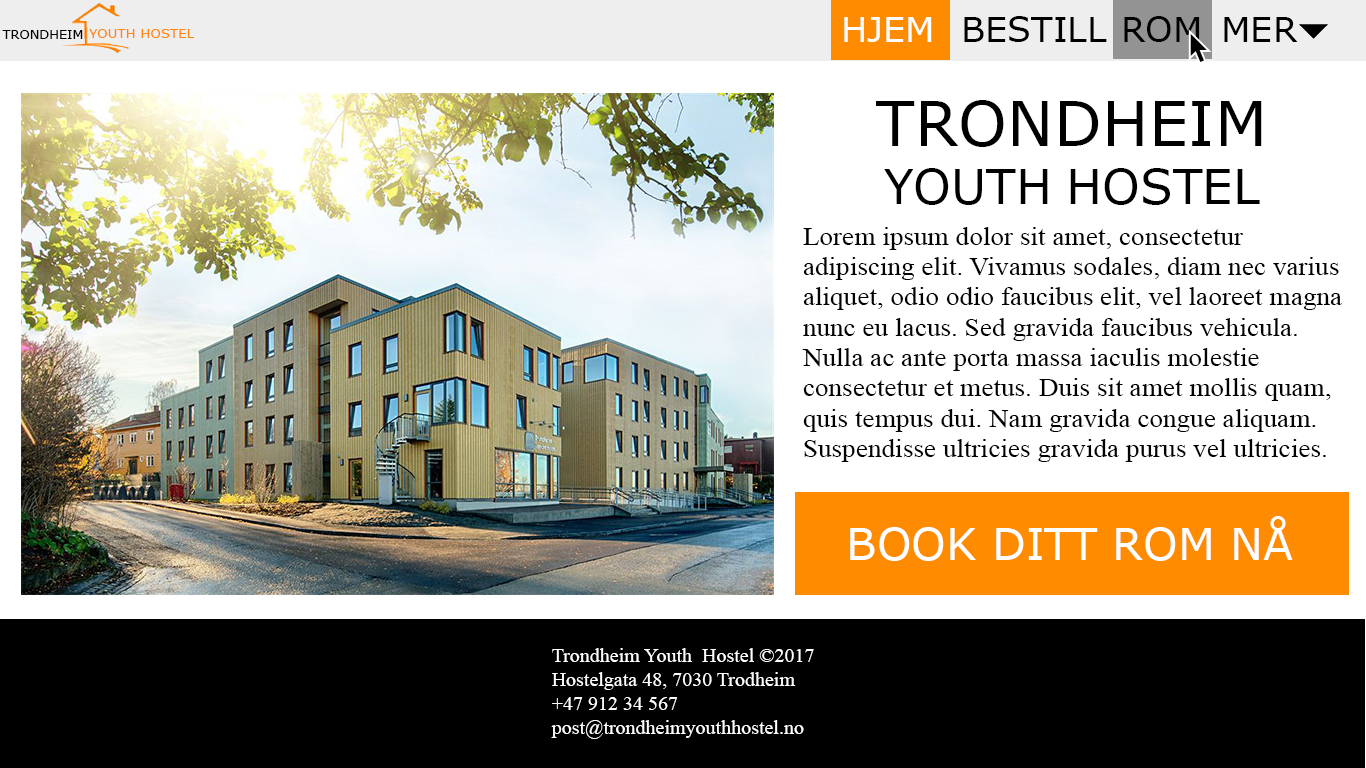
<style>
.page{position:relative;width:1366px;height:768px;background:#ffffff}
.page>*{position:absolute;margin:0}
.t1{font:35px "Verdana";color:#ffffff}
.t2{font:35px "Verdana";color:#000000}
.t3{font:12.9px "Verdana";color:#000000}
.t4{font:13.3px "Verdana";color:#fe8714}
.t5{font:48.2px "Verdana";color:#000000}
.t6{font:62.4px "Verdana";color:#000000}
.t7{font:25.3px "TimesNewRomanPSMT";color:#000000;scale:1.08 1}
.t8{font:44px "Verdana";color:#ffffff}
.t9{font:20px "TimesNewRomanPSMT";color:#ffffff}
</style>
<div class="page">
<p class="t1" style="left:844px;top:17px;width:88px;height:25px">HJEM</p>
<p class="t2" style="left:964px;top:16px;width:143px;height:26px">BESTILL</p>
<p class="t2" style="left:1124px;top:16px;width:76px;height:26px">ROM</p>
<p class="t2" style="left:1224px;top:17px;width:74px;height:25px">MER</p>
<p class="t3" style="left:2px;top:30px;width:81px;height:9px">TRONDHEIM</p>
<p class="t4" style="left:89px;top:29px;width:106px;height:9px">YOUTH HOSTEL</p>
<p class="t5" style="left:876px;top:100px;width:386px;height:105px;text-align:center"><span class="t6">TRONDHEIM<br></span>YOUTH HOSTEL</p>
<p class="t7" style="left:802px;top:227px;width:540px;height:235px">Lorem ipsum dolor sit amet, consectetur adipiscing elit. Vivamus sodales, diam nec varius aliquet, odio odio faucibus elit, vel laoreet magna nunc eu lacus. Sed gravida faucibus vehicula. Nulla ac ante porta massa iaculis molestie consectetur et metus. Duis sit amet mollis quam, quis tempus dui. Nam gravida congue aliquam. Suspendisse ultricies gravida purus vel ultricies.</p>
<p class="t8" style="left:850px;top:516px;width:443px;height:45px">BOOK DITT ROM NÅ</p>
<p class="t9" style="left:551px;top:648px;width:263px;height:91px">Trondheim Youth  Hostel ©2017<br>Hostelgata 48, 7030 Trodheim<br>+47 912 34 567<br>post@trondheimyouthhostel.no</p>
</div>
